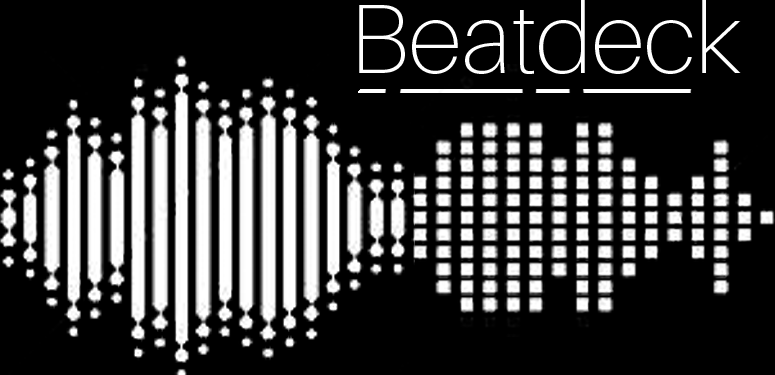
<style>
.page{position:relative;width:775px;height:375px;background:#000000}
.page>*{position:absolute;margin:0}
.t1{font:99px "Aileron-Thin";color:#ffffff}
</style>
<div class="page">
<p class="t1" style="left:359px;top:0px;width:382px;height:74px">Beatdeck</p>
</div>
